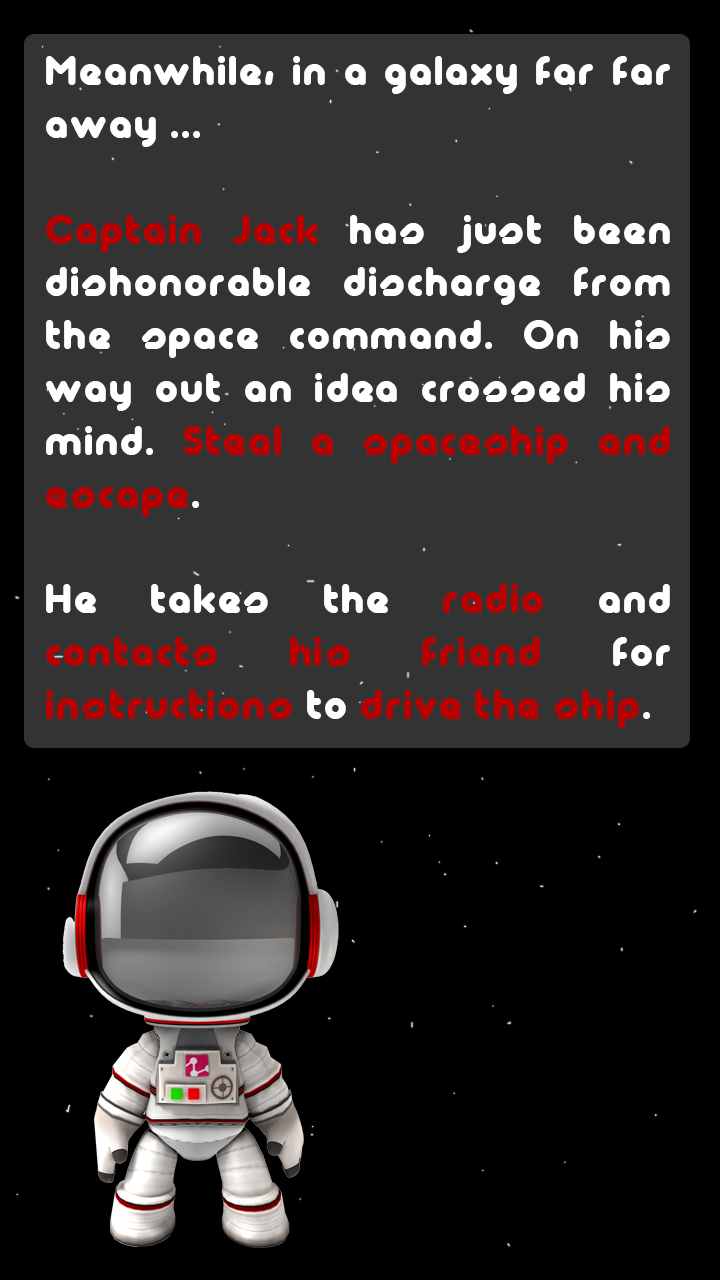
<style>
.page{position:relative;width:720px;height:1280px;background:#333333}
.page>*{position:absolute;margin:0}
.t1{font:44px "Maagkramp";color:#ffffff}
.t2{font:44px "Maagkramp";color:#ba0000}
</style>
<div class="page">
<p class="t1" style="left:46px;top:56px;width:624px;height:672px;text-align:justify">Meanwhile, in a galaxy far far away ...<br><br><span class="t2">Captain Jack</span> has just been dishonorable discharge from the space command. On his way out an idea crossed his mind. <span class="t2">Steal a spaceship and escape</span>.<br><br>He takes the <span class="t2">radio</span> and          <span class="t2">contacts his friend</span> for              <span class="t2">instructions </span>to <span class="t2">drive the ship</span>.</p>
</div>
